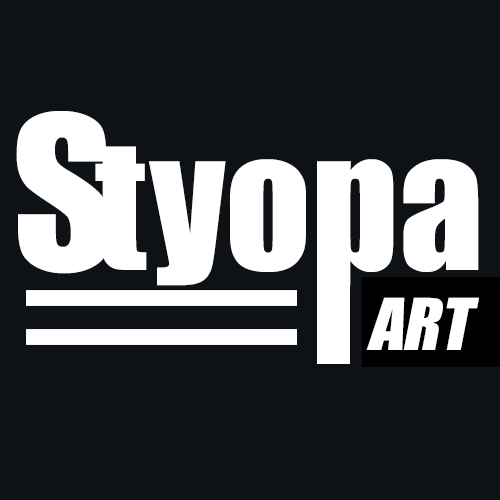
<style>
.page{position:relative;width:500px;height:500px;background:#0e1116}
.page>*{position:absolute;margin:0}
.t1{font:197.1px "Impact";color:#ffffff}
.t2{font:168.1px "Impact";color:#ffffff}
.t3{font:67.2px "Impact";color:#ffffff}
.t4{font:67.4px "Impact";color:#ffffff}
</style>
<div class="page">
<p class="t1" style="left:16px;top:111px;width:94px;height:163px">S</p>
<p class="t2" style="left:95px;top:146px;width:389px;height:204px;text-align:justify">tyopa<br><span class="t3">ART</span></p>
<p class="t4" style="left:366px;top:297px;width:113px;height:53px">ART</p>
</div>
